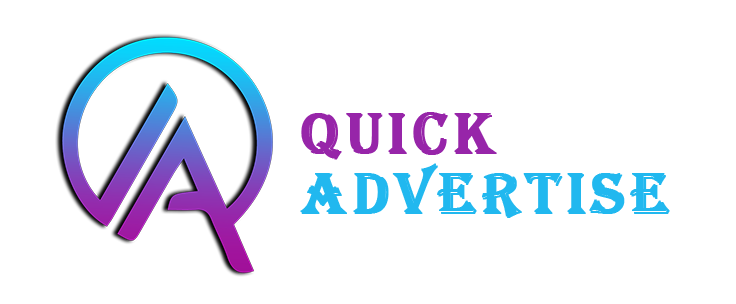
<style>
.page{position:relative;width:736px;height:304px;background:#ffffff}
.page>*{position:absolute;margin:0}
.t1{font:60px/20px "Algerian";letter-spacing:0.075em;color:#21b8ef;font-weight:bold}
.t2{font:60px/20px "Algerian";letter-spacing:0.075em;color:#9725a9;font-weight:bold}
</style>
<div class="page">
<p class="t1" style="left:300px;top:112px;width:370px;height:106px"><span class="t2">Quick<br><br><br></span>Advertise</p>
</div>
